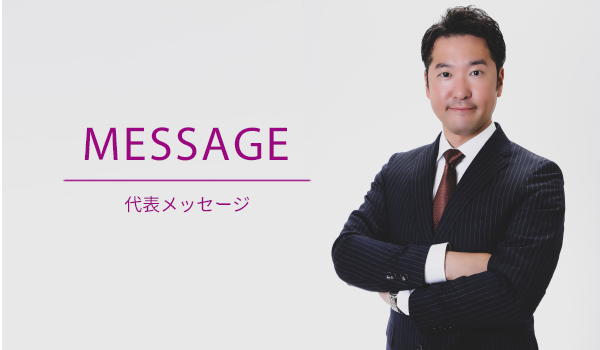
<style>
.page{position:relative;width:600px;height:350px;background:#e8e8e8}
.page>*{position:absolute;margin:0}
.t1{font:48px "MyriadPro-Regular";letter-spacing:0.05em;color:#9b0681}
.t2{font:18px "Nasu-Regular";color:#9b0681}
</style>
<div class="page">
<p class="t1" style="left:84px;top:127px;width:204px;height:34px">MESSAGE</p>
<p class="t2" style="left:124px;top:196px;width:126px;height:17px">代表メッセージ</p>
</div>
